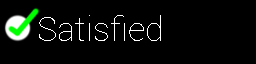
<style>
.page{position:relative;width:256px;height:64px;background:#000000}
.page>*{position:absolute;margin:0}
.t1{font:34px "Roboto-Thin";color:#ffffff}
</style>
<div class="page">
<p class="t1" style="left:39px;top:15px;width:122px;height:26px">Satisfied</p>
</div>
